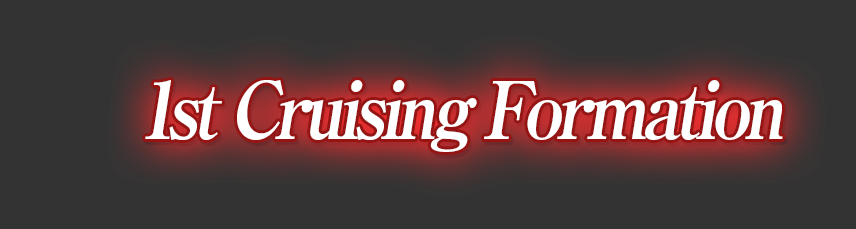
<style>
.page{position:relative;width:856px;height:229px;background:#333333}
.page>*{position:absolute;margin:0}
.t1{font:80px "RyuminPro-ExBold";letter-spacing:-0.08em;color:#ffffff;font-style:italic;scale:0.9 1}
</style>
<div class="page">
<p class="t1" style="left:145px;top:80px;width:638px;height:72px">1st Cruising Formation</p>
</div>
